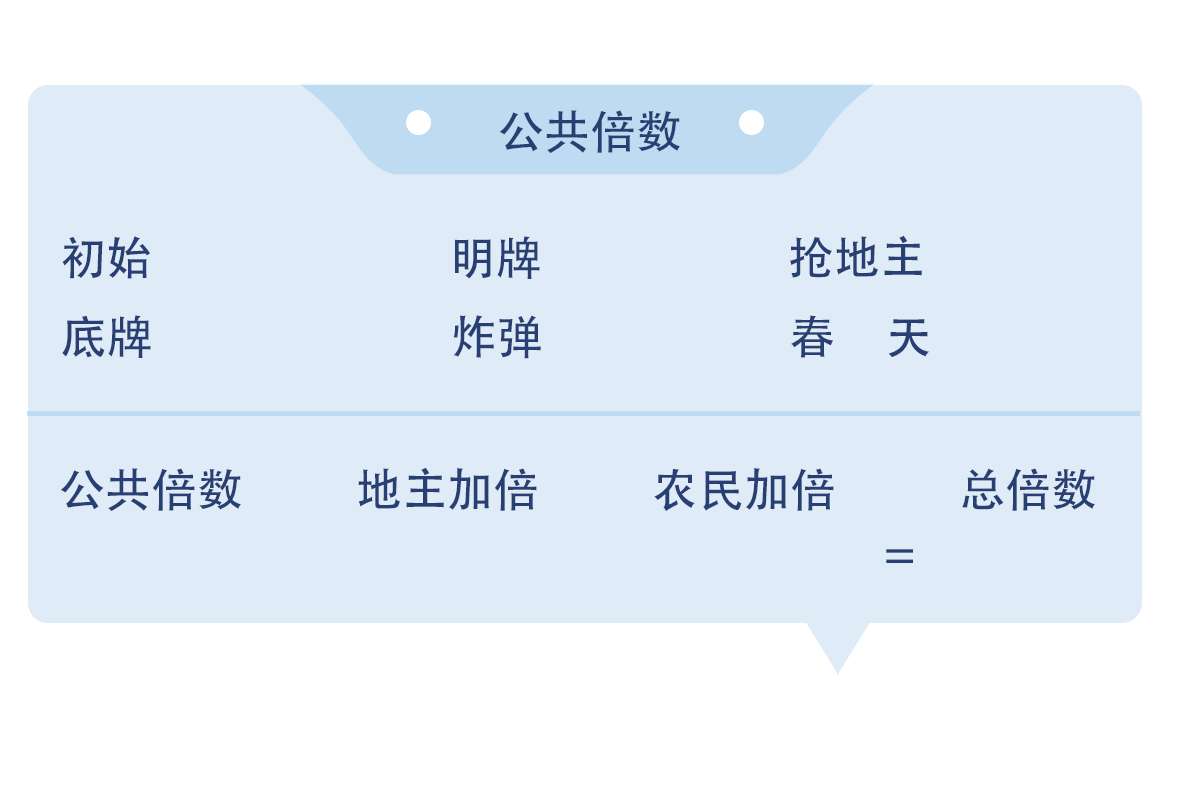
<style>
.page{position:relative;width:1181px;height:787px;background:#dfebf7}
.page>*{position:absolute;margin:0}
.t1{font:45.8px "AdobeHeitiStd-Regular";color:#283f74}
</style>
<div class="page">
<p class="t1" style="left:499px;top:110px;width:181px;height:43px">公共倍数</p>
<p class="t1" style="left:62px;top:235px;width:860px;height:44px">初始                             明牌                        抢地主</p>
<p class="t1" style="left:62px;top:315px;width:868px;height:44px">底牌                             炸弹                        春     天</p>
<p class="t1" style="left:60px;top:467px;width:1035px;height:44px">公共倍数           地主加倍           农民加倍            总倍数</p>
<p class="t1" style="left:886px;top:549px;width:27px;height:14px">=</p>
</div>
